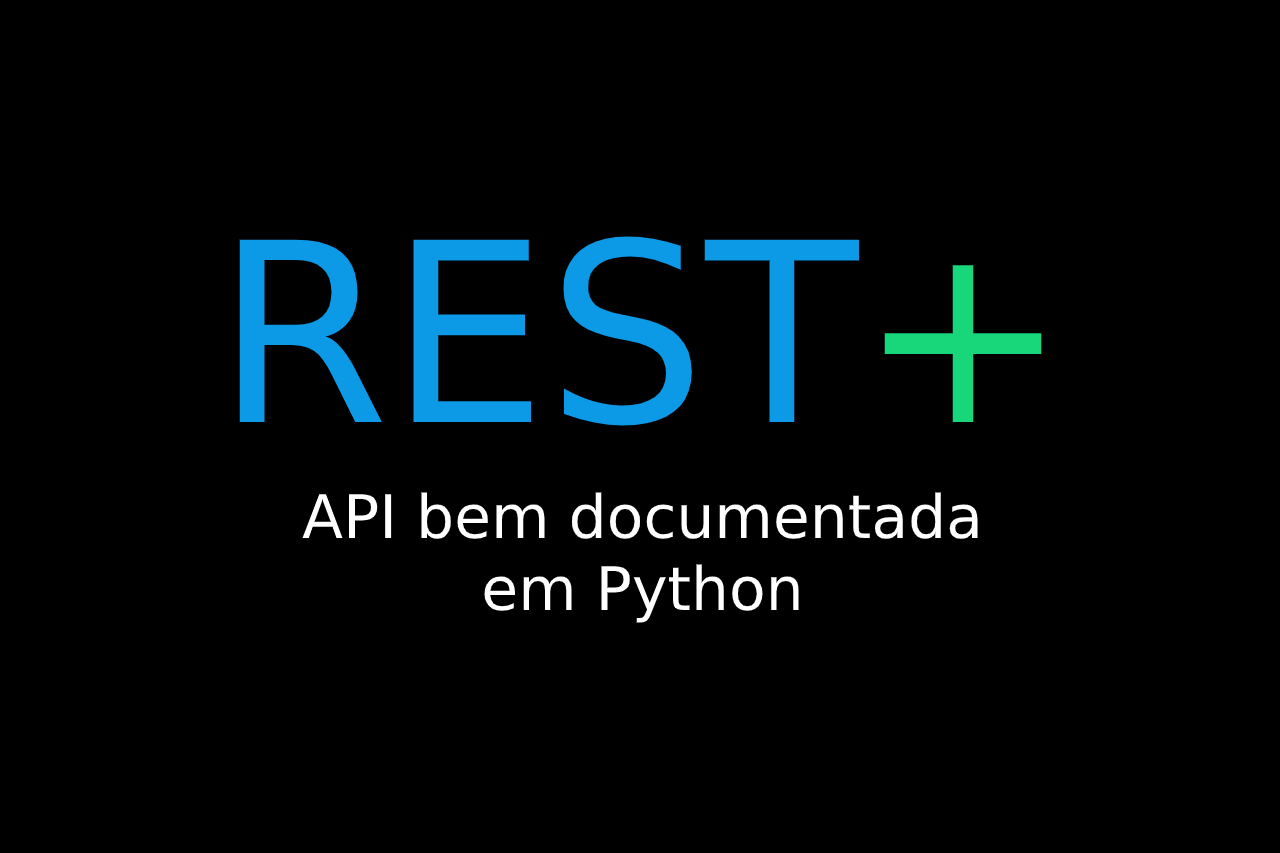
<style>
.page{position:relative;width:1280px;height:853px;background:#000000}
.page>*{position:absolute;margin:0}
.t1{font:250px "DejaVuSans";color:#0c9ae6}
.t2{font:250px "DejaVuSans";color:#18d77b}
.t3{font:60px "DejaVuSans";color:#ffffff}
</style>
<div class="page">
<p class="t1" style="left:239px;top:236px;width:803px;height:190px">REST<span class="t2">+</span></p>
<p class="t3" style="left:302px;top:492px;width:676px;height:131px;text-align:center">API bem documentada <br>em Python</p>
</div>
